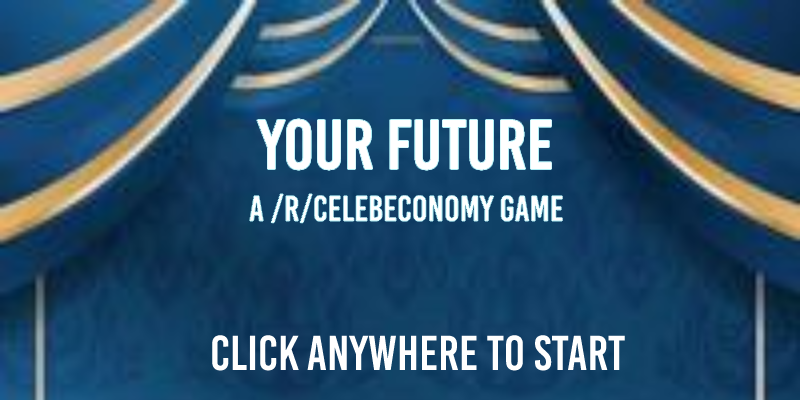
<style>
.page{position:relative;width:800px;height:400px}
.page>*{position:absolute;margin:0}
.t1{font:70px "BebasKai";color:#ffffff}
.t2{font:36px "BebasKai";color:#ffffff}
.t3{font:49px "BebasKai";color:#ffffff}
</style>
<div class="page">
<p class="t1" style="left:257px;top:119px;width:295px;height:51px">YOUR FUTURE</p>
<p class="t2" style="left:249px;top:194px;width:314px;height:29px">A /r/celebeconomy game</p>
<p class="t3" style="left:212px;top:335px;width:413px;height:36px">Click Anywhere to Start</p>
</div>
